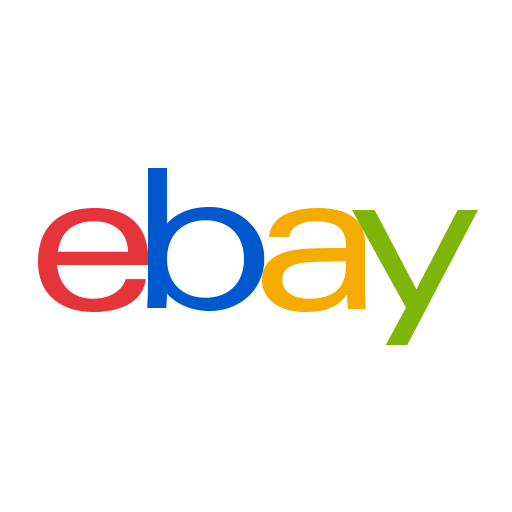
<style>
.page{position:relative;width:512px;height:512px;background:#ffffff}
.page>*{position:absolute;margin:0}
.t1{font:195px "Univers-Extended";letter-spacing:-0.145em;color:#0058cf}
.t2{font:195px "Univers-Extended";letter-spacing:-0.145em;color:#e5343a}
.t3{font:195px "Univers-Extended";letter-spacing:-0.145em;color:#f5ab00}
.t4{font:195px "Univers-Extended";letter-spacing:-0.145em;color:#7fb409}
</style>
<div class="page">
<p class="t1" style="left:147px;top:168px;width:118px;height:143px">b</p>
<p class="t2" style="left:38px;top:208px;width:111px;height:104px">e</p>
<p class="t3" style="left:262px;top:208px;width:104px;height:104px">a</p>
<p class="t4" style="left:352px;top:210px;width:126px;height:135px">y</p>
</div>
